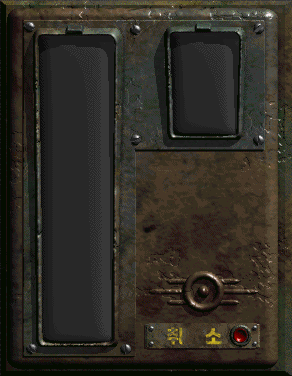
<style>
.page{position:relative;width:292px;height:376px}
.page>*{position:absolute;margin:0}
.t1{font:18.5px "HakgyoansimPosterB"}
</style>
<div class="page">
<p class="t1" style="left:167px;top:327px;width:55px;height:18px">취     소</p>
</div>
